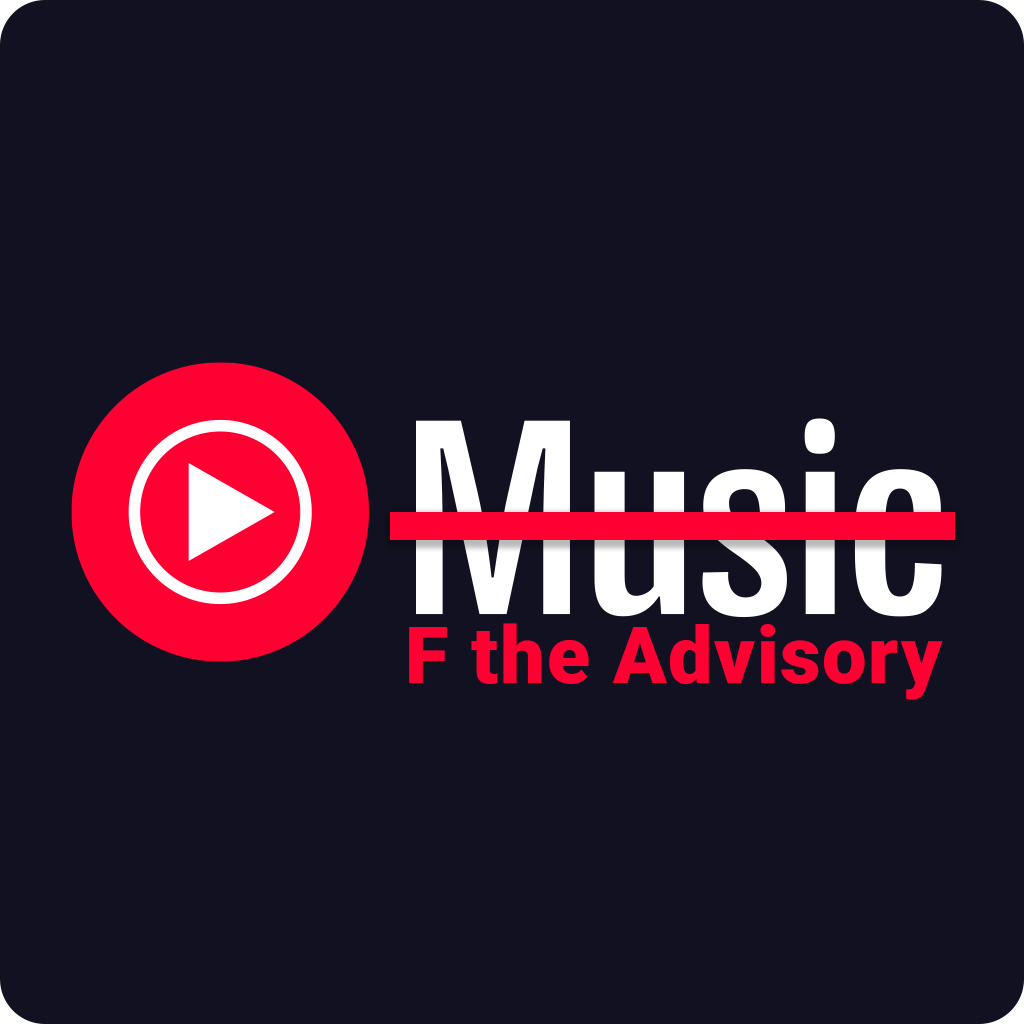
<style>
.page{position:relative;width:1024px;height:1024px;background:#121121}
.page>*{position:absolute;margin:0}
.t1{font:79.2px "Roboto-Black";letter-spacing:0.02em;color:#ff0033}
</style>
<div class="page">
<p class="t1" style="left:409px;top:623px;width:534px;height:77px">F the Advisory</p>
</div>
